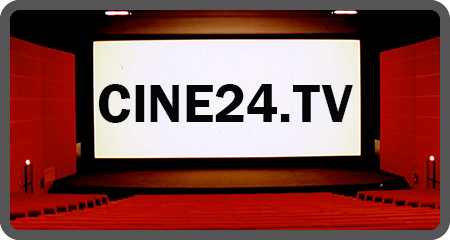
<style>
.page{position:relative;width:450px;height:240px}
.page>*{position:absolute;margin:0}
.t1{font:55px "FranklinGothic-Demi";color:#050505}
</style>
<div class="page">
<p class="t1" style="left:98px;top:84px;width:255px;height:39px">CINE24.TV</p>
</div>
